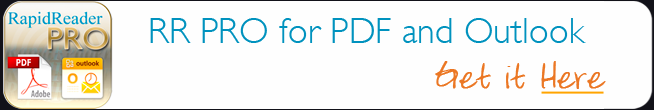
<style>
.page{position:relative;width:654px;height:110px;background:#fefefe}
.page>*{position:absolute;margin:0}
.t1{font:36px "GillSans-Light";letter-spacing:0.005em;color:#0092be}
.t2{font:30px "Lindy";letter-spacing:0.005em;color:#eb7724;font-weight:bold}
</style>
<div class="page">
<p class="t1" style="left:150px;top:18px;width:436px;height:25px">RR PRO for PDF and Outlook</p>
<p class="t2" style="left:435px;top:61px;width:171px;height:28px">Get it Here</p>
</div>
